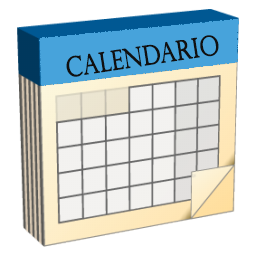
<style>
.page{position:relative;width:256px;height:256px;background:#ffffff}
.page>*{position:absolute;margin:0}
.t1{font:26.3px "PerpetuaTitlingMT-Light";color:#111010;font-weight:bold;scale:0.88 1}
</style>
<div class="page">
<p class="t1" style="left:66px;top:35px;width:153px;height:42px;rotate:-9deg">CALENDARIO</p>
</div>
